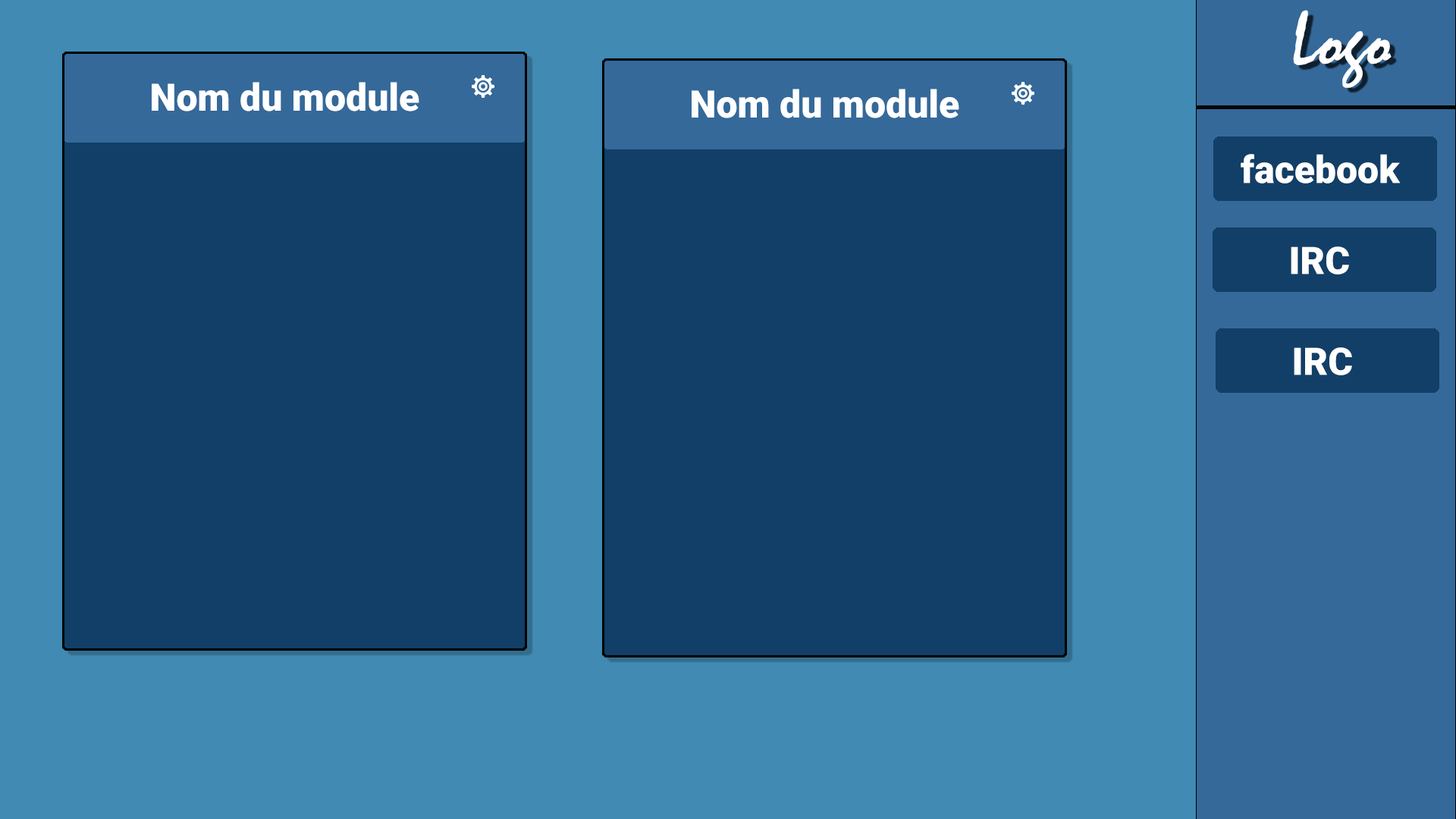
<style>
.page{position:relative;width:1456px;height:819px;background:#113f67}
.page>*{position:absolute;margin:0}
.t1{font:77.4px "Mistral";color:#ffffff}
.t2{font:37.9px "Roboto-Black";color:#ffffff}
</style>
<div class="page">
<p class="t1" style="left:1293px;top:10px;width:99px;height:78px">Logo</p>
<p class="t2" style="left:152px;top:82px;width:267px;height:29px">Nom du module</p>
<p class="t2" style="left:692px;top:89px;width:267px;height:29px">Nom du module</p>
<p class="t2" style="left:1241px;top:154px;width:160px;height:30px">facebook</p>
<p class="t2" style="left:1291px;top:246px;width:58px;height:29px">IRC</p>
<p class="t2" style="left:1294px;top:347px;width:58px;height:28px">IRC</p>
</div>
